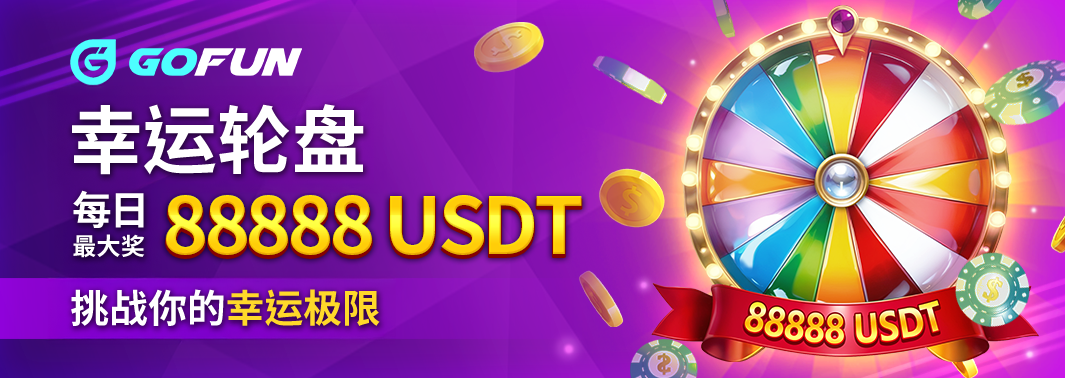
<style>
.page{position:relative;width:1065px;height:378px}
.page>*{position:absolute;margin:0}
.t1{font:74.4px "NotoSansCJKtc-Bold";letter-spacing:-0.01em;color:#ffffff}
.t2{font:39.7px "NotoSansCJKtc-Bold";letter-spacing:-0.01em;color:#ffffff}
.t3{font:24.1px "NotoSansCJKtc-Bold";letter-spacing:-0.01em;color:#ffffff}
.t4{font:38.9px "NotoSansCJKtc-Bold";letter-spacing:-0.01em;color:#ffffff}
.t5{font:38.9px "NotoSansCJKtc-Bold";letter-spacing:-0.01em;color:#ffd92a}
</style>
<div class="page">
<p class="t1" style="left:72px;top:104px;width:292px;height:71px">幸运轮盘</p>
<p class="t2" style="left:73px;top:190px;width:71px;height:38px">每日</p>
<p class="t3" style="left:73px;top:234px;width:72px;height:24px">最大奖</p>
<p class="t4" style="left:71px;top:289px;width:309px;height:37px">挑战你的<span class="t5">幸运极限</span></p>
</div>
